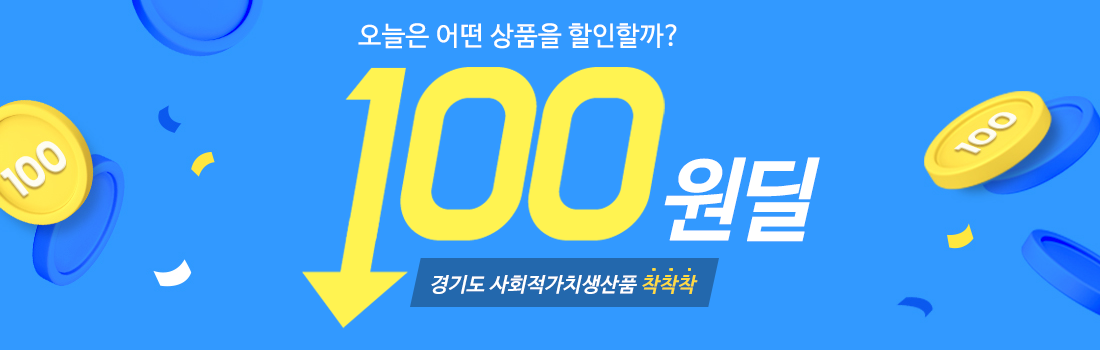
<style>
.page{position:relative;width:1100px;height:350px;background:#3299ff}
.page>*{position:absolute;margin:0}
.t1{font:26.6px "NanumBarunGothic";color:#ffffff;font-weight:bold}
.t2{font:92.8px "NanumBarunGothicBold";letter-spacing:-0.08em;color:#ffffff;font-weight:bold}
.t3{font:20.8px "NanumBarunGothicBold";color:#ffffff}
.t4{font:20.8px "NanumBarunGothicBold";color:#ffdb40}
</style>
<div class="page">
<p class="t1" style="left:358px;top:23px;width:319px;height:26px">오늘은 어떤 상품을 할인할까?</p>
<p class="t2" style="left:664px;top:157px;width:156px;height:85px">원딜</p>
<p class="t3" style="left:431px;top:275px;width:267px;height:19px">경기도 사회적가치생산품 <span class="t4">착착착</span></p>
</div>
